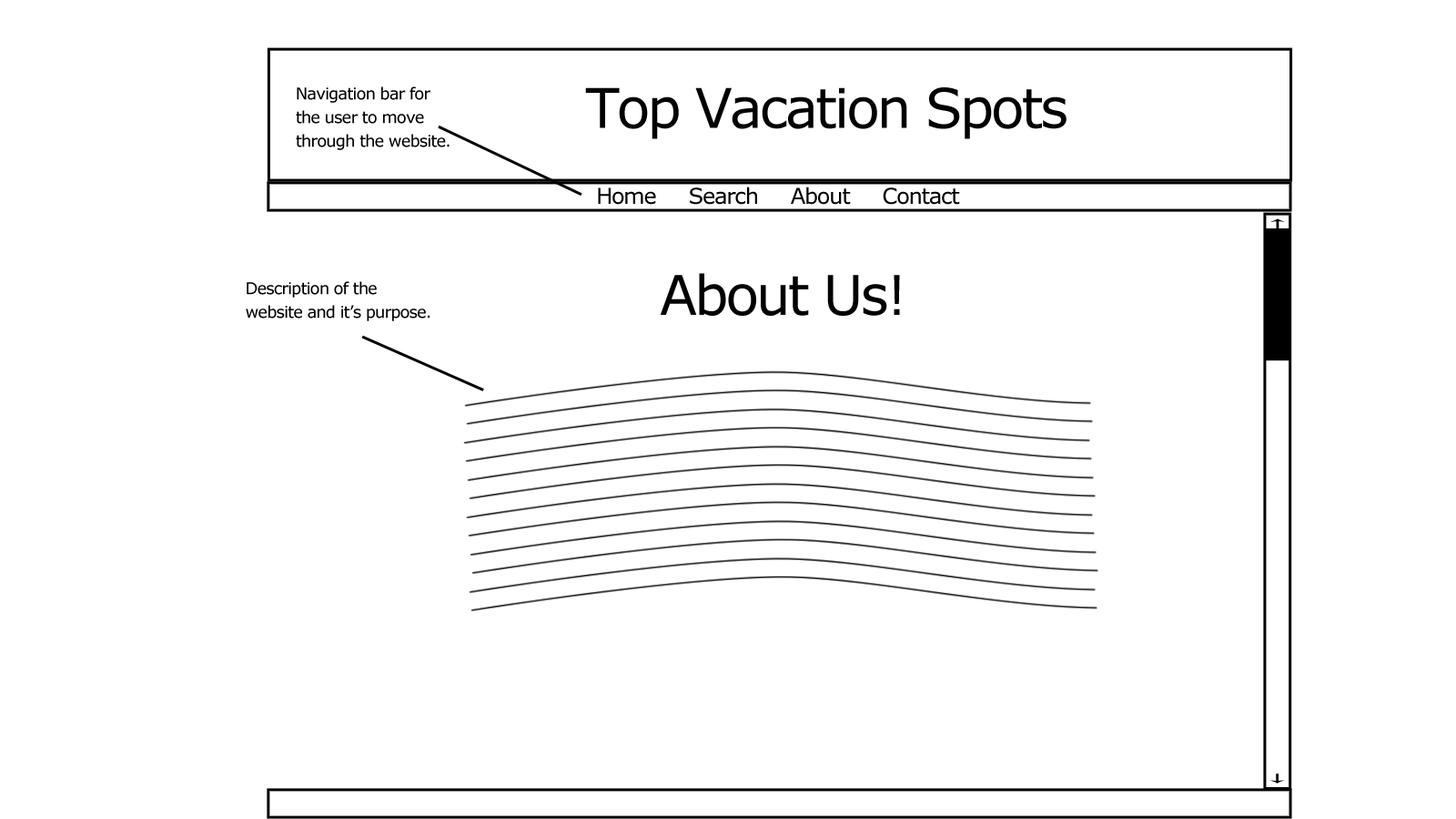
<style>
.page{position:relative;width:1456px;height:819px;background:#ffffff}
.page>*{position:absolute;margin:0}
.t1{font:16.4px/23.7px "Verdana";letter-spacing:-0.05em;color:#000000}
.t2{font:54.6px "Verdana";letter-spacing:-0.05em;color:#000000}
.t3{font:21.8px "Verdana";letter-spacing:-0.05em;color:#000000}
</style>
<div class="page">
<p class="t1" style="left:296px;top:86px;width:154px;height:64px">Navigation bar for <br>the user to move <br>through the website.</p>
<p class="t2" style="left:585px;top:87px;width:482px;height:52px">Top Vacation Spots</p>
<p class="t3" style="left:598px;top:187px;width:362px;height:18px">Home     Search     About     Contact</p>
<p class="t1" style="left:246px;top:281px;width:184px;height:40px">Description of the <br>website and it’s purpose.</p>
<p class="t2" style="left:660px;top:273px;width:240px;height:43px">About Us!</p>
</div>
